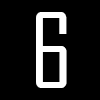
<style>
.page{position:relative;width:100px;height:100px;background:#000000}
.page>*{position:absolute;margin:0}
.t1{font:100px "AgencyFB-Reg";color:#ffffff}
</style>
<div class="page">
<p class="t1" style="left:36px;top:12px;width:31px;height:76px">6</p>
</div>
